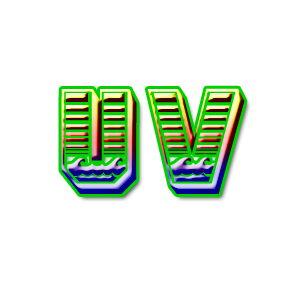
<style>
.page{position:relative;width:308px;height:308px;background:#ffffff}
.page>*{position:absolute;margin:0}
.t1{font:120px "OceanViewInitials"}
</style>
<div class="page">
<p class="t1" style="left:61px;top:88px;width:184px;height:106px">uv</p>
</div>
